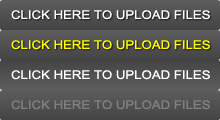
<style>
.page{position:relative;width:220px;height:120px}
.page>*{position:absolute;margin:0}
.t1{font:12px "ArialMT";color:#ffffff;scale:1.1 1}
.t2{font:12px "ArialMT";color:#ffff00;scale:1.1 1}
.t3{font:12px "ArialMT";color:#808080;scale:1.1 1}
</style>
<div class="page">
<p class="t1" style="left:11px;top:10px;width:199px;height:10px">CLICK HERE TO UPLOAD FILES</p>
<p class="t2" style="left:11px;top:40px;width:199px;height:10px">CLICK HERE TO UPLOAD FILES</p>
<p class="t1" style="left:11px;top:70px;width:199px;height:10px">CLICK HERE TO UPLOAD FILES</p>
<p class="t3" style="left:11px;top:100px;width:199px;height:10px">CLICK HERE TO UPLOAD FILES</p>
</div>
